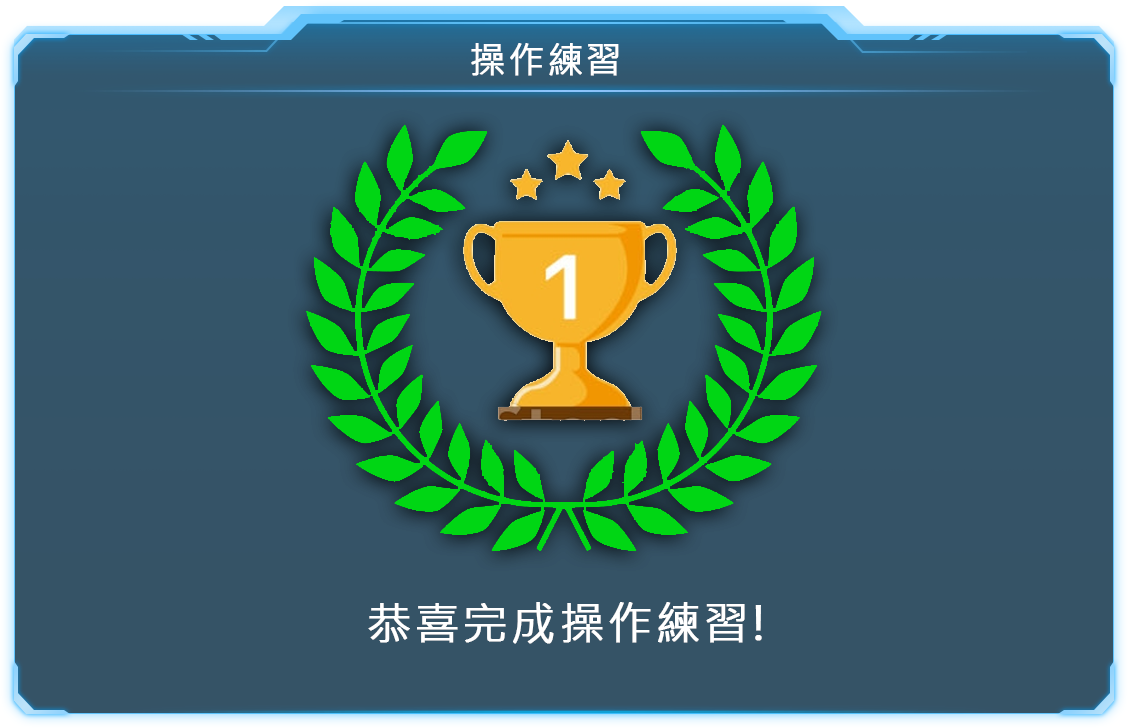
<style>
.page{position:relative;width:1128px;height:728px}
.page>*{position:absolute;margin:0}
.t1{font:36px "MicrosoftJhengHeiRegular";letter-spacing:0.05em;color:#ffffff;font-weight:bold}
.t2{font:44.7px "MicrosoftJhengHeiRegular";letter-spacing:0.05em;color:#ffffff;font-weight:bold}
</style>
<div class="page">
<p class="t1" style="left:471px;top:43px;width:148px;height:33px">操作練習</p>
<p class="t2" style="left:368px;top:602px;width:394px;height:42px">恭喜完成操作練習!</p>
</div>
